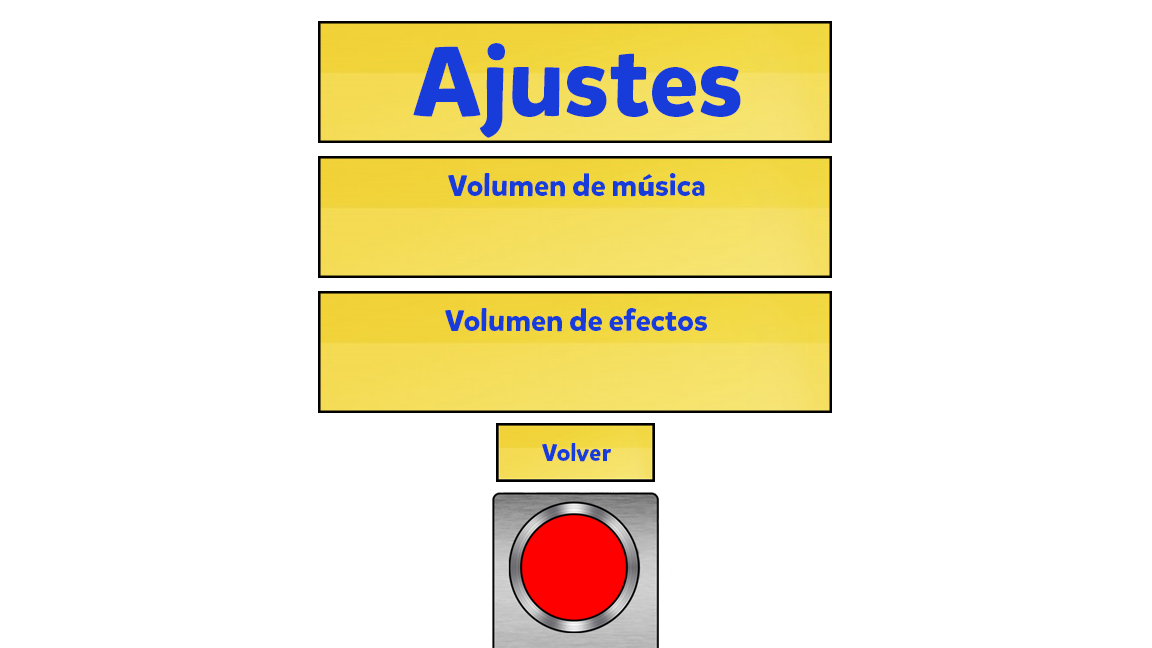
<style>
.page{position:relative;width:1152px;height:648px;background:#ffffff}
.page>*{position:absolute;margin:0}
.t1{font:98px "MikadoBoldDEMO";color:#173cd9}
.t2{font:30px "MikadoBoldDEMO";color:#173cd9}
.t3{font:30px "BerlinSansFBDemi-Bold";color:#173cd9}
.t4{font:24px "MikadoBoldDEMO";color:#173cd9}
</style>
<div class="page">
<p class="t1" style="left:413px;top:43px;width:328px;height:95px">Ajustes</p>
<p class="t2" style="left:448px;top:173px;width:257px;height:24px">Volumen de m<span class="t3">ú</span>sica</p>
<p class="t2" style="left:445px;top:308px;width:262px;height:24px">Volumen de efectos</p>
<p class="t4" style="left:542px;top:443px;width:69px;height:19px">Volver</p>
</div>
